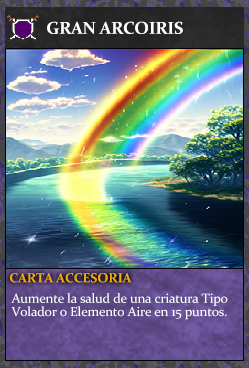
<style>
.page{position:relative;width:249px;height:368px}
.page>*{position:absolute;margin:0}
.t1{font:17.3px "Constantia-Bold";letter-spacing:-0.02em;color:#ffffff}
.t2{font:13.3px "Constantia-Bold";letter-spacing:-0.02em;color:#f2ac05}
.t3{font:13.3px/13.3px "Constantia";letter-spacing:-0.02em;color:#ffffff}
</style>
<div class="page">
<p class="t1" style="left:47px;top:21px;width:136px;height:13px">GRAN ARCOIRIS</p>
<p class="t2" style="left:10px;top:273px;width:122px;height:10px">CARTA ACCESORIA</p>
<p class="t3" style="left:11px;top:293px;width:217px;height:27px">Aumente la salud de una criatura Tipo<br>Volador o Elemento Aire en 15 puntos.</p>
</div>
